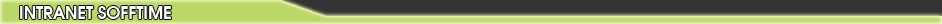
<style>
.page{position:relative;width:942px;height:24px;background:#333333}
.page>*{position:absolute;margin:0}
.t1{font:16.7px "AvantGarde-Demi";color:#ffffff}
</style>
<div class="page">
<p class="t1" style="left:20px;top:6px;width:151px;height:13px">INTRANET SOFFTIME</p>
</div>
